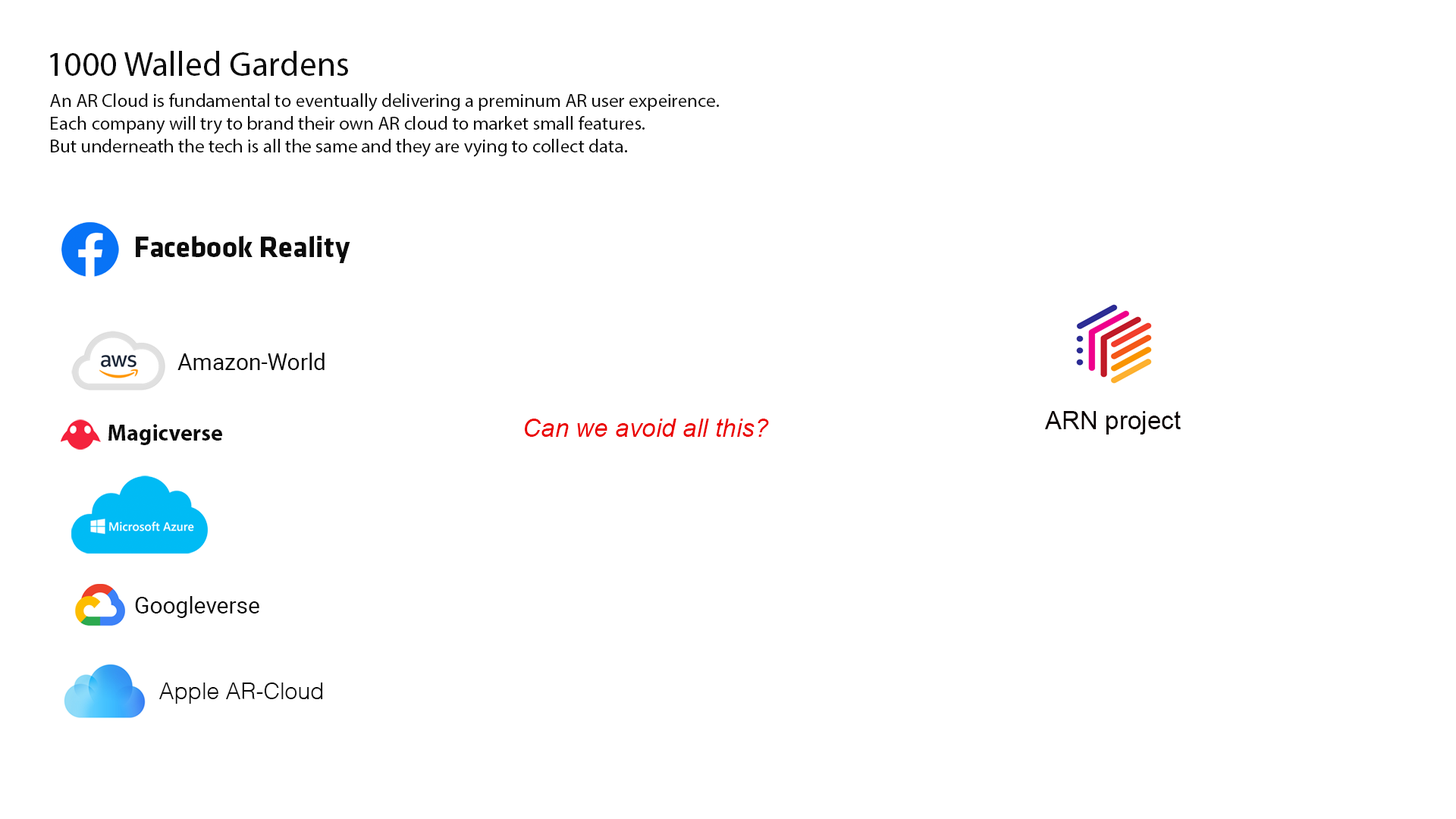
<style>
.page{position:relative;width:1456px;height:819px;background:#ffffff}
.page>*{position:absolute;margin:0}
.t1{font:34.8px "MyriadPro-Regular";color:#0b0b0b}
.t2{font:19px "MyriadPro-Regular";color:#0b0b0b}
.t3{font:30.2px "Klavika-Bold";color:#0b0b0b}
.t4{font:23px "Roboto-Regular";color:#0b0b0b}
.t5{font:25.3px "ArialMT";color:#090000}
.t6{font:23px "MyriadPro-Bold";color:#0b0b0b}
.t7{font:25.3px "Arial-ItalicMT";color:#eb0000}
.t8{font:23px "Helvetica-Light";color:#0b0b0b}
</style>
<div class="page">
<p class="t1" style="left:50px;top:51px;width:298px;height:25px">1000 Walled Gardens</p>
<p class="t2" style="left:50px;top:93px;width:669px;height:64px">An AR Cloud is fundamental to eventually delivering a preminum AR user expeirence.<br>Each company will try to brand their own AR cloud to market small features.<br>But underneath the tech is all the same and they are vying to collect data.</p>
<p class="t3" style="left:136px;top:236px;width:214px;height:27px">Facebook Reality</p>
<p class="t4" style="left:177px;top:353px;width:148px;height:17px">Amazon-World</p>
<p class="t5" style="left:1045px;top:411px;width:136px;height:24px">ARN project</p>
<p class="t6" style="left:108px;top:424px;width:114px;height:21px">Magicverse</p>
<p class="t7" style="left:525px;top:419px;width:244px;height:18px">Can we avoid all this?</p>
<p class="t4" style="left:135px;top:596px;width:124px;height:22px">Googleverse</p>
<p class="t8" style="left:159px;top:682px;width:164px;height:22px">Apple AR-Cloud</p>
</div>
